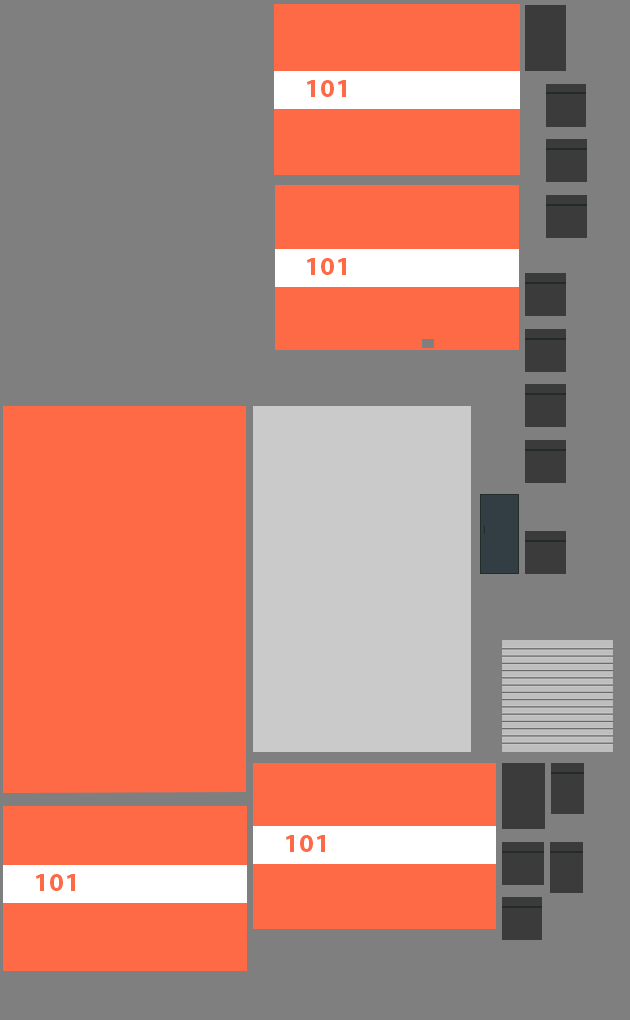
<style>
.page{position:relative;width:630px;height:1020px;background:#7f7f7f}
.page>*{position:absolute;margin:0}
.t1{font:25.9px "MyriadPro-Bold";color:#ff6a46;scale:1.04 1}
</style>
<div class="page">
<p class="t1" style="left:307px;top:80px;width:39px;height:17px">101</p>
<p class="t1" style="left:307px;top:258px;width:39px;height:17px">101</p>
<p class="t1" style="left:286px;top:835px;width:39px;height:17px">101</p>
<p class="t1" style="left:36px;top:874px;width:39px;height:17px">101</p>
</div>
